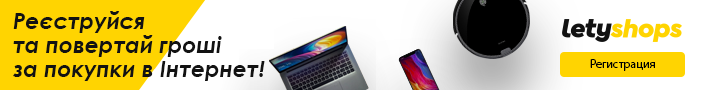
<style>
.page{position:relative;width:728px;height:90px;background:#ffffff}
.page>*{position:absolute;margin:0}
.t1{font:22px/24px "CenturyGothic-BoldItalic";color:#121212}
</style>
<div class="page">
<p class="t1" style="left:13px;top:11px;width:252px;height:70px">Реєструйся <br>та повертай гроші <br>за покупки в Інтернет!</p>
</div>
